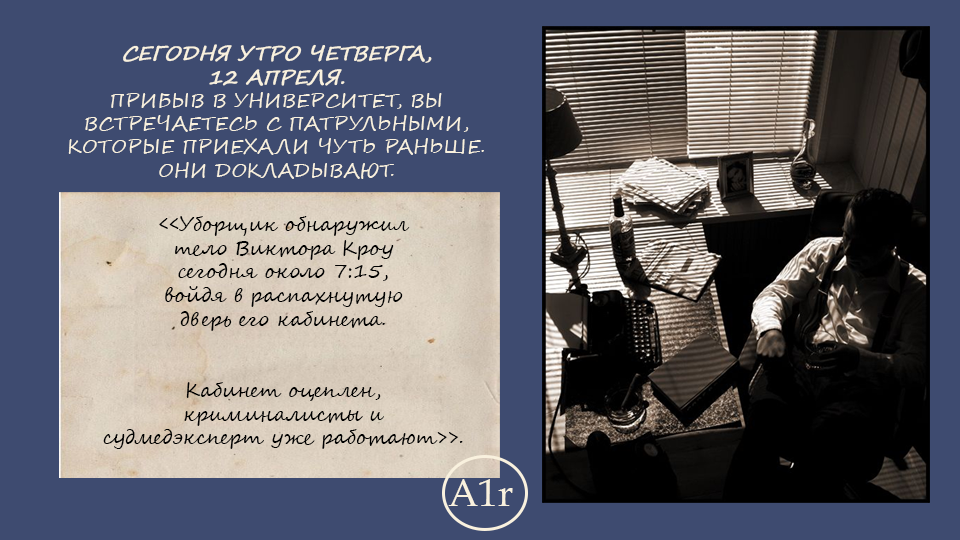
<style>
.page{position:relative;width:960px;height:540px;background:#3e4b70}
.page>*{position:absolute;margin:0}
.t1{font:19.4px "SegoeScript";color:#f9f1de;text-transform:uppercase}
.t2{font:19.4px "SegoeScript";color:#f9f1de;text-transform:uppercase;font-weight:bold;font-style:italic}
.t3{font:19.7px "SegoeScript";color:#000000}
.t4{font:38.8px "BookAntiqua";color:#f9f1de}
</style>
<div class="page">
<p class="t1" style="left:68px;top:44px;width:416px;height:135px;text-align:center"><span class="t2">Сегодня утро четверга, <br>12 апреля. <br></span>Прибыв в Университет, вы встречаетесь с патрульными, <br>которые приехали чуть раньше. Они докладывают.</p>
<p class="t3" style="left:103px;top:216px;width:360px;height:233px;text-align:center">&lt;&lt;Уборщик обнаружил <br>тело Виктора Кроу <br>сегодня около 7:15, <br>войдя в распахнутую <br>дверь его кабинета.<br><br><br>Кабинет оцеплен, <br>криминалисты и <br>судмедэксперт уже работают&gt;&gt;.</p>
<p class="t4" style="left:448px;top:479px;width:65px;height:27px">A1r</p>
</div>
